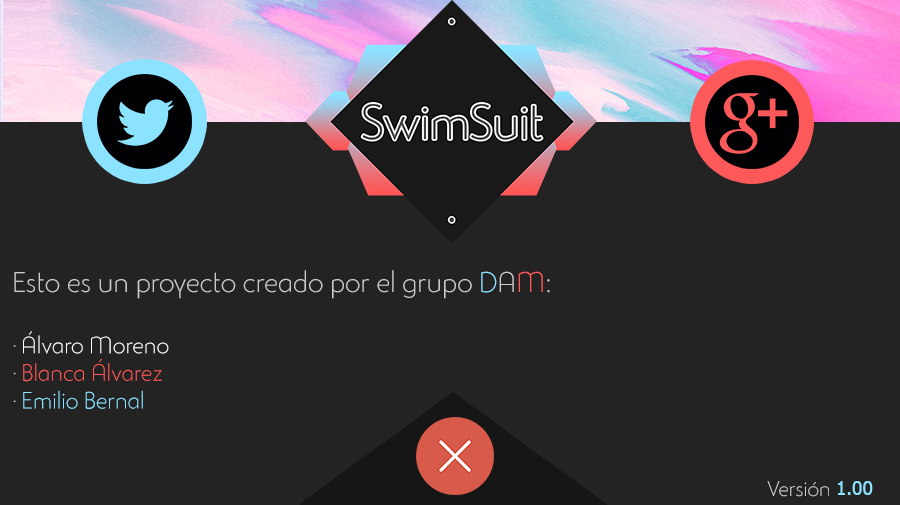
<style>
.page{position:relative;width:900px;height:505px;background:#232323}
.page>*{position:absolute;margin:0}
.t1{font:28px "StudioGothicAlternateTrial-Extr";color:#cccccc}
.t2{font:28px "StudioGothicAlternateTrial-Extr";color:#8be3ff}
.t3{font:28px "StudioGothicAlternateTrial-Extr";color:#fd595a}
.t4{font:23px "StudioGothicAlternateTrial-Extr";color:#cccccc}
.t5{font:23px "StudioGothicAlternateTrial-Extr";color:#ffffff}
.t6{font:23px "StudioGothicAlternateTrial-Extr";color:#fd595a}
.t7{font:23px "StudioGothicAlternateTrial-Extr";color:#8be3ff}
.t8{font:21px "StudioGothicAlternateTrial-Extr";color:#cccccc}
.t9{font:19px "Tahoma";color:#8be3ff}
</style>
<div class="page">
<p class="t1" style="left:13px;top:270px;width:537px;height:139px">Esto es un proyecto creado por el grupo <span class="t2">D</span>A<span class="t3">M</span>:<br><br><span class="t4">· </span><span class="t5">Álvaro Moreno<br></span><span class="t4">· </span><span class="t6">Blanca Álvarez<br></span><span class="t4">· </span><span class="t7">Emilio Bernal</span></p>
<p class="t8" style="left:767px;top:481px;width:62px;height:16px">Versión</p>
<p class="t9" style="left:838px;top:481px;width:35px;height:14px">1.00</p>
</div>
